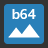
<style>
.page{position:relative;width:48px;height:48px;background:#2980b9}
.page>*{position:absolute;margin:0}
.t1{font:14px "SegoeUI-Semibold";color:#ffffff}
</style>
<div class="page">
<p class="t1" style="left:12px;top:9px;width:24px;height:10px">b64</p>
</div>
